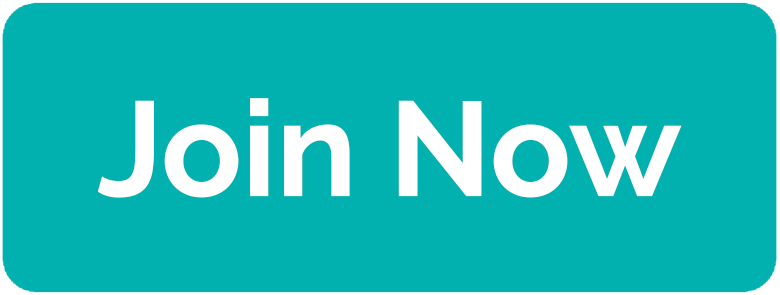
<style>
.page{position:relative;width:780px;height:295px;background:#01b1af}
.page>*{position:absolute;margin:0}
.t1{font:133.8px "Raleway-Bold";color:#ffffff}
</style>
<div class="page">
<p class="t1" style="left:97px;top:98px;width:585px;height:100px">Join Now</p>
</div>
